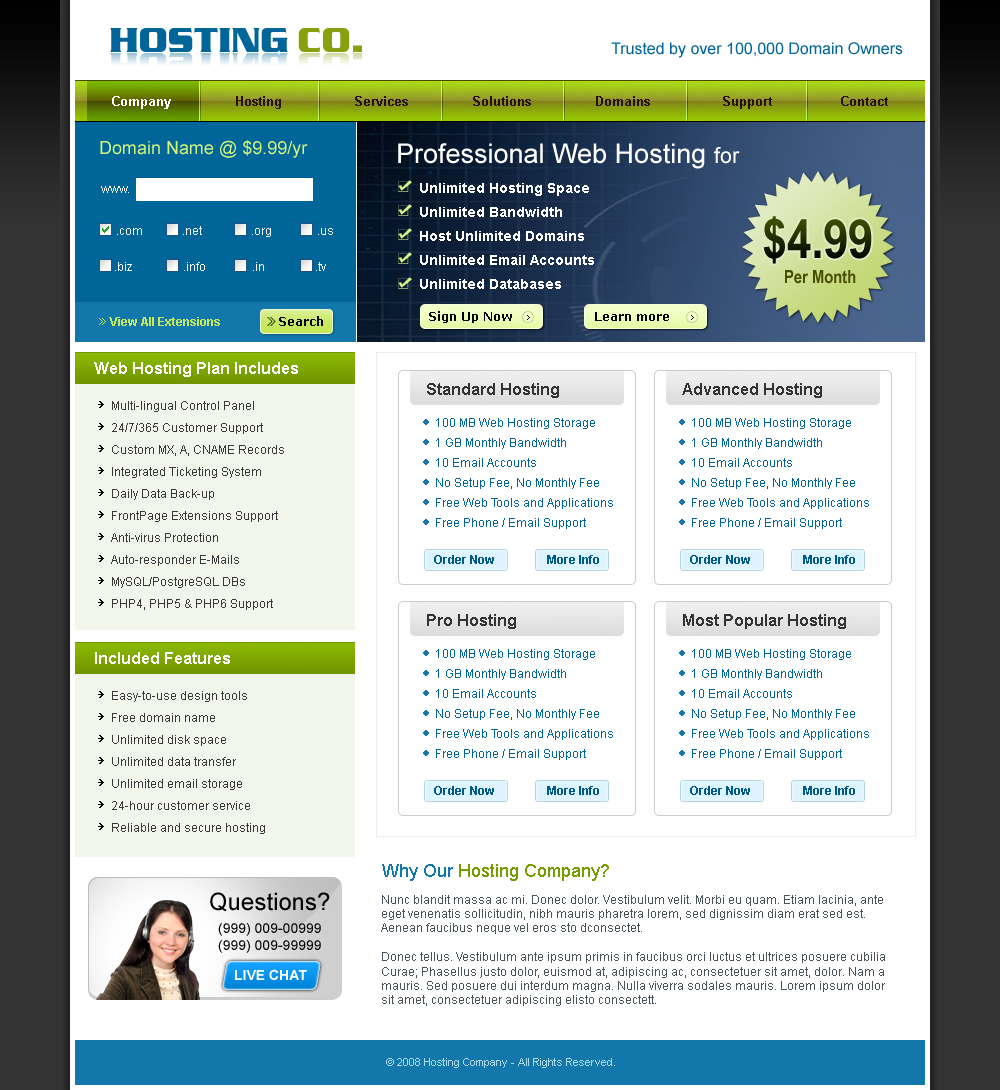
<style>
.page{position:relative;width:1000px;height:1090px;background:#ffffff}
.page>*{position:absolute;margin:0}
.t1{font:36px "SerpentineDEE-Bold";color:#006699;text-transform:uppercase}
.t2{font:36px "SerpentineDEE-Bold";color:#8aa00f;text-transform:uppercase}
.t3{font:36px "SerpentineDEE-Bold";text-transform:uppercase}
.t4{font:16px "ArialMT";color:#006699}
.t5{font:13px "Arial-BoldMT";color:#280f0f}
.t6{font:13px "Arial-BoldMT";color:#ffffff}
.t7{font:18px "ArialMT";color:#d6f47a}
.t8{font:27px "ArialMT";color:#ffffff}
.t9{font:22px "ArialMT";color:#ffffff}
.t10{font:14px/24px "Arial-BoldMT";color:#ffffff}
.t11{font:12px "ArialMT";color:#ffffff}
.t12{font:54px "ArialNarrow-Bold"}
.t13{font:18px "ArialNarrow-Bold";color:#484e00}
.t14{font:12px "Arial-BoldMT";color:#c6e85d}
.t15{font:12px "Verdana-Bold";color:#000000}
.t16{font:16px "Arial-BoldMT";color:#ffffff}
.t17{font:16px "Arial-BoldMT";color:#333333}
.t18{font:12px/22px "ArialMT";color:#383838}
.t19{font:12px/20px "ArialMT";color:#006699}
.t20{font:12px "Arial-BoldMT";color:#005a89}
.t21{font:18px "ArialMT";color:#769c00}
.t22{font:18px "ArialMT";color:#1278ab}
.t23{font:24px "ArialMT";color:#020202}
.t24{font:12px "ArialMT";color:#49545a}
.t25{font:14px "ArialMT";color:#020202}
.t26{font:14px "Arial-BoldMT";color:#ffffff;text-transform:uppercase}
.t27{font:11px "ArialMT";color:#afd9ee}
</style>
<div class="page">
<p class="t1" style="left:110px;top:28px;width:252px;height:24px">Hosting <span class="t2">Co.</span></p>
<p class="t3" style="left:110px;top:53px;width:252px;height:24px">Hosting Co.</p>
<p class="t4" style="left:611px;top:42px;width:292px;height:16px">Trusted by over 100,000 Domain Owners</p>
<p class="t5" style="left:112px;top:96px;width:776px;height:13px"><span class="t6">Company</span>                Hosting                  Services                Solutions                Domains                  Support                 Contact</p>
<p class="t7" style="left:100px;top:140px;width:208px;height:18px">Domain Name @ $9.99/yr</p>
<p class="t8" style="left:398px;top:143px;width:342px;height:26px">Professional Web Hosting <span class="t9">for</span></p>
<p class="t10" style="left:420px;top:183px;width:174px;height:106px">Unlimited Hosting Space<br>Unlimited Bandwidth<br>Host Unlimited Domains<br>Unlimited Email Accounts<br>Unlimited Databases</p>
<p class="t11" style="left:101px;top:186px;width:28px;height:7px">www.</p>
<p class="t12" style="left:763px;top:216px;width:109px;height:48px">$4.99</p>
<p class="t11" style="left:117px;top:226px;width:216px;height:11px">.com             .net            .org          .us</p>
<p class="t11" style="left:115px;top:262px;width:211px;height:9px">.biz               .info              .in           .tv</p>
<p class="t13" style="left:785px;top:270px;width:71px;height:14px">Per Month</p>
<p class="t14" style="left:109px;top:317px;width:111px;height:9px">View All Extensions</p>
<p class="t15" style="left:279px;top:316px;width:44px;height:10px">Search</p>
<p class="t15" style="left:429px;top:311px;width:83px;height:12px">Sign Up Now</p>
<p class="t15" style="left:595px;top:312px;width:74px;height:9px">Learn more</p>
<p class="t16" style="left:94px;top:362px;width:204px;height:15px">Web Hosting Plan Includes</p>
<p class="t17" style="left:427px;top:383px;width:132px;height:15px">Standard Hosting</p>
<p class="t17" style="left:682px;top:383px;width:140px;height:15px">Advanced Hosting</p>
<p class="t18" style="left:111px;top:401px;width:173px;height:209px">Multi-lingual Control Panel<br>24/7/365 Customer Support<br>Custom MX, A, CNAME Records<br>Integrated Ticketing System<br>Daily Data Back-up<br>FrontPage Extensions Support<br>Anti-virus Protection<br>Auto-responder E-Mails<br>MySQL/PostgreSQL DBs<br>PHP4, PHP5 &amp; PHP6 Support</p>
<p class="t19" style="left:436px;top:418px;width:177px;height:111px">100 MB Web Hosting Storage<br>1 GB Monthly Bandwidth<br>10 Email Accounts<br>No Setup Fee, No Monthly Fee<br>Free Web Tools and Applications<br>Free Phone / Email Support</p>
<p class="t19" style="left:692px;top:418px;width:177px;height:111px">100 MB Web Hosting Storage<br>1 GB Monthly Bandwidth<br>10 Email Accounts<br>No Setup Fee, No Monthly Fee<br>Free Web Tools and Applications<br>Free Phone / Email Support</p>
<p class="t20" style="left:434px;top:555px;width:60px;height:9px">Order Now</p>
<p class="t20" style="left:547px;top:555px;width:52px;height:9px">More Info</p>
<p class="t20" style="left:690px;top:555px;width:60px;height:9px">Order Now</p>
<p class="t20" style="left:803px;top:555px;width:52px;height:9px">More Info</p>
<p class="t17" style="left:427px;top:614px;width:89px;height:15px">Pro Hosting</p>
<p class="t17" style="left:683px;top:614px;width:163px;height:15px">Most Popular Hosting</p>
<p class="t16" style="left:95px;top:652px;width:135px;height:12px">Included Features</p>
<p class="t19" style="left:436px;top:649px;width:177px;height:111px">100 MB Web Hosting Storage<br>1 GB Monthly Bandwidth<br>10 Email Accounts<br>No Setup Fee, No Monthly Fee<br>Free Web Tools and Applications<br>Free Phone / Email Support</p>
<p class="t19" style="left:692px;top:649px;width:177px;height:111px">100 MB Web Hosting Storage<br>1 GB Monthly Bandwidth<br>10 Email Accounts<br>No Setup Fee, No Monthly Fee<br>Free Web Tools and Applications<br>Free Phone / Email Support</p>
<p class="t18" style="left:112px;top:691px;width:153px;height:143px">Easy-to-use design tools<br>Free domain name<br>Unlimited disk space<br>Unlimited data transfer<br>Unlimited email storage<br>24-hour customer service<br>Reliable and secure hosting</p>
<p class="t20" style="left:434px;top:786px;width:60px;height:9px">Order Now</p>
<p class="t20" style="left:547px;top:786px;width:52px;height:9px">More Info</p>
<p class="t20" style="left:690px;top:786px;width:60px;height:9px">Order Now</p>
<p class="t20" style="left:803px;top:786px;width:52px;height:9px">More Info</p>
<p class="t21" style="left:382px;top:864px;width:227px;height:17px"><span class="t22">Why Our </span>Hosting Company?</p>
<p class="t23" style="left:210px;top:892px;width:120px;height:20px">Questions?</p>
<p class="t24" style="left:381px;top:895px;width:504px;height:111px">Nunc blandit massa ac mi. Donec dolor. Vestibulum velit. Morbi eu quam. Etiam lacinia, ante eget venenatis sollicitudin, nibh mauris pharetra lorem, sed dignissim diam erat sed est. Aenean faucibus neque vel eros sto dconsectet.<br><br>Donec tellus. Vestibulum ante ipsum primis in faucibus orci luctus et ultrices posuere cubilia Curae; Phasellus justo dolor, euismod at, adipiscing ac, consectetuer sit amet, dolor. Nam a mauris. Sed posuere dui interdum magna. Nulla viverra sodales mauris. Lorem ipsum dolor sit amet, consectetuer adipiscing elisto consectett.</p>
<p class="t25" style="left:218px;top:923px;width:103px;height:30px">(999) 009-00999<br>(999) 009-99999</p>
<p class="t26" style="left:235px;top:969px;width:72px;height:11px">Live Chat</p>
<p class="t27" style="left:386px;top:1058px;width:229px;height:10px">© 2008 Hosting Company - All Rights Reserved.</p>
</div>
